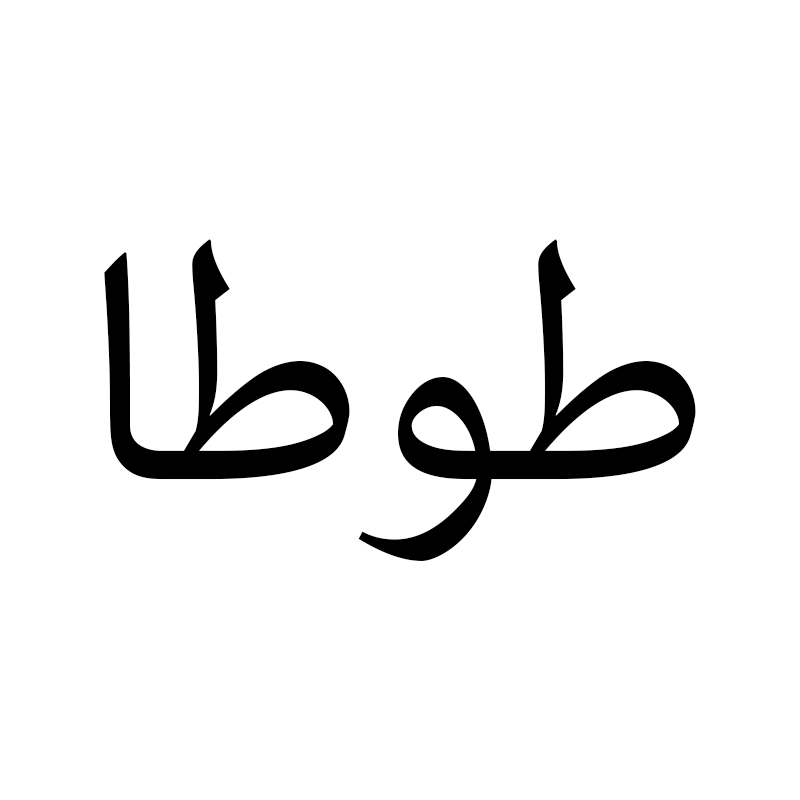
<style>
.page{position:relative;width:800px;height:800px;background:#ffffff}
.page>*{position:absolute;margin:0}
.t1{font:450px "AdobeArabic-Regular";color:#000000}
</style>
<div class="page">
<p class="t1" style="left:104px;top:239px;width:592px;height:322px">طوطا</p>
</div>
